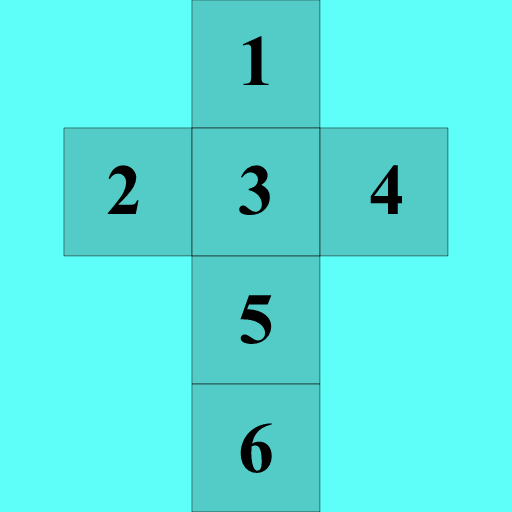
<style>
.page{position:relative;width:512px;height:512px;background:#5efff9}
.page>*{position:absolute;margin:0}
.t1{font:72px "TimesNewRomanPS-BoldMT";color:#000000}
</style>
<div class="page">
<p class="t1" style="left:242px;top:36px;width:27px;height:49px">1</p>
<p class="t1" style="left:107px;top:165px;width:32px;height:49px">2</p>
<p class="t1" style="left:239px;top:165px;width:31px;height:51px">3</p>
<p class="t1" style="left:370px;top:165px;width:33px;height:49px">4</p>
<p class="t1" style="left:240px;top:295px;width:32px;height:49px">5</p>
<p class="t1" style="left:240px;top:423px;width:32px;height:50px">6</p>
</div>
